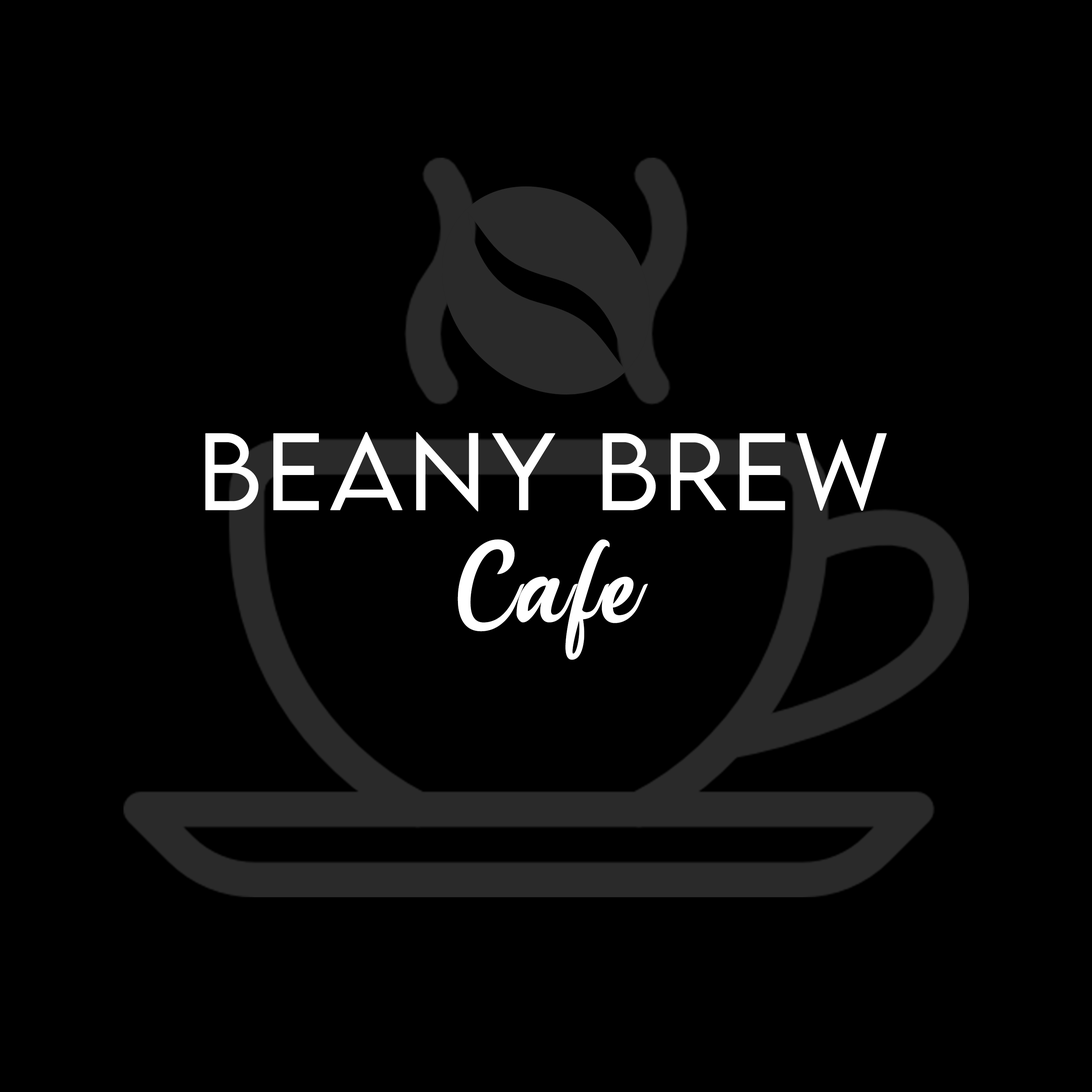
<style>
.page{position:relative;width:1092px;height:1092px;background:#000000}
.page>*{position:absolute;margin:0}
.t1{font:97px/112.2px "LEMONMILK-Light";letter-spacing:0.04em;color:#ffffff;font-weight:bold}
.t2{font:97px/112.2px "Handycheera";letter-spacing:0.04em;color:#ffffff;font-weight:bold}
</style>
<div class="page">
<p class="t1" style="left:205px;top:432px;width:682px;height:228px;text-align:center">Beany Brew<br><span class="t2">Cafe</span></p>
</div>
